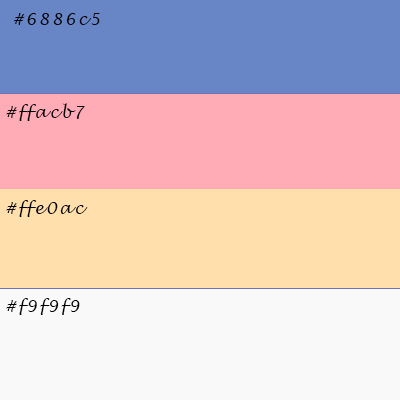
<style>
.page{position:relative;width:400px;height:400px;background:#f9f9f9}
.page>*{position:absolute;margin:0}
.t1{font:15.9px "LucidaHandwriting-Italic";letter-spacing:0.15em;color:#000003}
</style>
<div class="page">
<p class="t1" style="left:13px;top:13px;width:87px;height:12px">#6886c5</p>
<p class="t1" style="left:6px;top:103px;width:79px;height:18px">#ffacb7</p>
<p class="t1" style="left:6px;top:200px;width:82px;height:17px">#ffe0ac</p>
<p class="t1" style="left:6px;top:298px;width:74px;height:17px">#f9f9f9</p>
</div>
